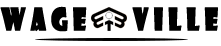
<style>
.page{position:relative;width:221px;height:46px;background:#ffffff}
.page>*{position:absolute;margin:0}
.t1{font:30.2px "ShowcardGothic-Reg";letter-spacing:0.2em;color:#000000;font-weight:bold;scale:0.79 1}
</style>
<div class="page">
<p class="t1" style="left:0px;top:6px;width:218px;height:26px">Wage    Ville</p>
</div>
